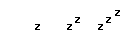
<style>
.page{position:relative;width:128px;height:32px;background:#ffffff}
.page>*{position:absolute;margin:0}
.t1{font:8px "Small Fonts";color:#000000;font-weight:bold}
</style>
<div class="page">
<p class="t1" style="left:75px;top:17px;width:5px;height:6px">Z</p>
<p class="t1" style="left:106px;top:17px;width:5px;height:6px">Z</p>
<p class="t1" style="left:115px;top:10px;width:5px;height:6px">Z</p>
<p class="t1" style="left:35px;top:24px;width:5px;height:6px">Z</p>
<p class="t1" style="left:67px;top:24px;width:5px;height:6px">Z</p>
<p class="t1" style="left:98px;top:24px;width:5px;height:6px">Z</p>
</div>
